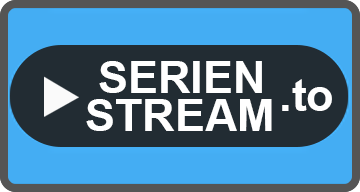
<style>
.page{position:relative;width:360px;height:192px;background:#222c33}
.page>*{position:absolute;margin:0}
.t1{font:45px "Arial-BoldMT";color:#ffffff}
</style>
<div class="page">
<p class="t1" style="left:99px;top:61px;width:163px;height:32px">SERIEN</p>
<p class="t1" style="left:282px;top:79px;width:50px;height:32px">.to</p>
<p class="t1" style="left:86px;top:99px;width:186px;height:32px">STREAM</p>
</div>
